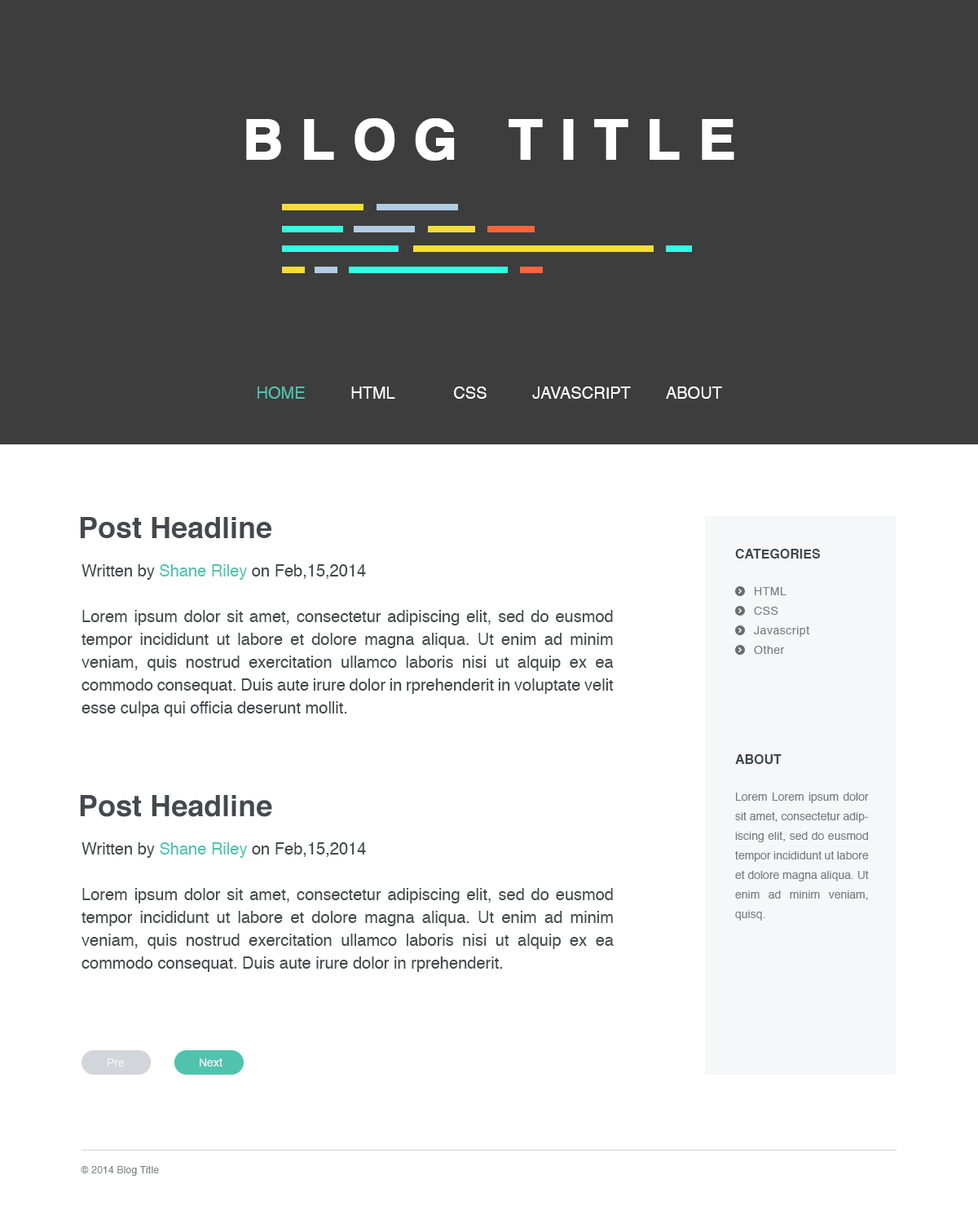
<style>
.page{position:relative;width:978px;height:1219px;background:#ffffff}
.page>*{position:absolute;margin:0}
.t1{font:55.4px "Helvetica-Bold";letter-spacing:0.3em;color:#ffffff;text-transform:uppercase;font-weight:bold}
.t2{font:28.5px "Helvetica-Bold";color:#ffffff;font-weight:bold}
.t3{font:16.3px "Helvetica";color:#ffffff}
.t4{font:16.3px "Helvetica";color:#50c3af}
.t5{font:29.4px "Helvetica-Bold";color:#45494d}
.t6{font:13px "Helvetica-Bold";color:#384048;text-transform:uppercase}
.t7{font:16.3px "Helvetica";color:#45494d}
.t8{font:11.4px/19.6px "Helvetica";letter-spacing:0.04em;color:#787b80}
.t9{font:16.3px/22.9px "Helvetica";color:#45494d}
.t10{font:29.3px "Helvetica-Bold";color:#45494d}
.t11{font:11.4px/19.6px "Helvetica";color:#787b80}
.t12{font:11.4px/16.3px "Helvetica";color:#787b80}
.t13{font:16.3px/22.8px "Helvetica";color:#45494d}
.t14{font:11.4px "Helvetica";color:#f5f5f5}
.t15{font:9.8px "Helvetica";letter-spacing:0.02em;color:#7e8287}
</style>
<div class="page">
<p class="t1" style="left:246px;top:118px;width:489px;height:43px"><span class="t2"><br></span>BlOg title</p>
<p class="t3" style="left:258px;top:386px;width:464px;height:13px"><span class="t4">HOME         </span> HTML             CSS          JAVASCRIPT        ABOUT</p>
<p class="t5" style="left:80px;top:517px;width:191px;height:21px">Post Headline</p>
<p class="t6" style="left:735px;top:549px;width:85px;height:9px">CATEGORIES</p>
<p class="t7" style="left:82px;top:564px;width:284px;height:16px">Written by <span class="t4">Shane Riley</span> on Feb,15,2014</p>
<p class="t8" style="left:754px;top:587px;width:56px;height:67px;text-align:right">HTML<br>CSS<br>Javascript<br>Other</p>
<p class="t9" style="left:82px;top:610px;width:532px;height:107px;text-align:justify">Lorem ipsum dolor sit amet, consectetur adipiscing elit, sed do eusmod tempor incididunt ut labore et dolore magna aliqua. Ut enim ad minim veniam, quis nostrud exercitation ullamco laboris nisi ut alquip ex ea commodo consequat. Duis aute irure dolor in rprehenderit in voluptate velit esse culpa qui officia deserunt mollit.</p>
<p class="t6" style="left:735px;top:754px;width:47px;height:10px">About</p>
<p class="t10" style="left:80px;top:795px;width:192px;height:22px">Post Headline</p>
<p class="t11" style="left:735px;top:792px;width:134px;height:128px;text-align:justify"><span class="t12">Lorem </span>Lorem ipsum dolor sit amet, consectetur adipiscing elit, sed do eusmod tempor incididunt ut labore et dolore magna aliqua. Ut enim ad minim veniam, quisq.</p>
<p class="t7" style="left:82px;top:842px;width:284px;height:16px">Written by <span class="t4">Shane Riley</span> on Feb,15,2014</p>
<p class="t13" style="left:82px;top:888px;width:532px;height:84px;text-align:justify">Lorem ipsum dolor sit amet, consectetur adipiscing elit, sed do eusmod tempor incididunt ut labore et dolore magna aliqua. Ut enim ad minim veniam, quis nostrud exercitation ullamco laboris nisi ut alquip ex ea commodo consequat. Duis aute irure dolor in rprehenderit.</p>
<p class="t14" style="left:108px;top:1058px;width:17px;height:8px">Pre</p>
<p class="t14" style="left:200px;top:1058px;width:23px;height:8px">Next</p>
<p class="t15" style="left:81px;top:1166px;width:78px;height:10px">© 2014 Blog Title</p>
</div>
